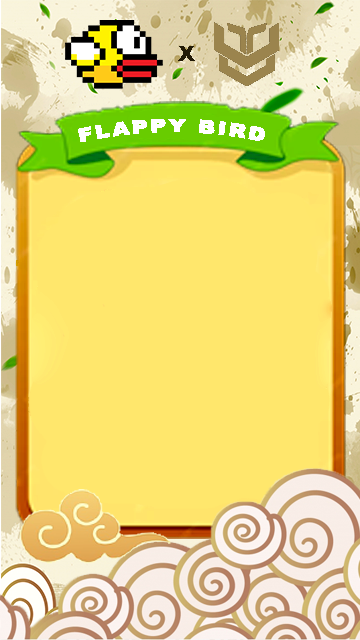
<style>
.page{position:relative;width:360px;height:640px;background:#ffe76c}
.page>*{position:absolute;margin:0}
.t1{font:19.7px "Arial-Black";letter-spacing:0.12em;color:#221a07;text-transform:uppercase;scale:1.18 1}
.t2{font:18px "Arial-Black";letter-spacing:0.12em;color:#ffffff;text-transform:uppercase;scale:1.18 1}
</style>
<div class="page">
<p class="t1" style="left:178px;top:46px;width:17px;height:15px">x</p>
<p class="t2" style="left:78px;top:119px;width:187px;height:23px">Flappy Bird</p>
</div>
